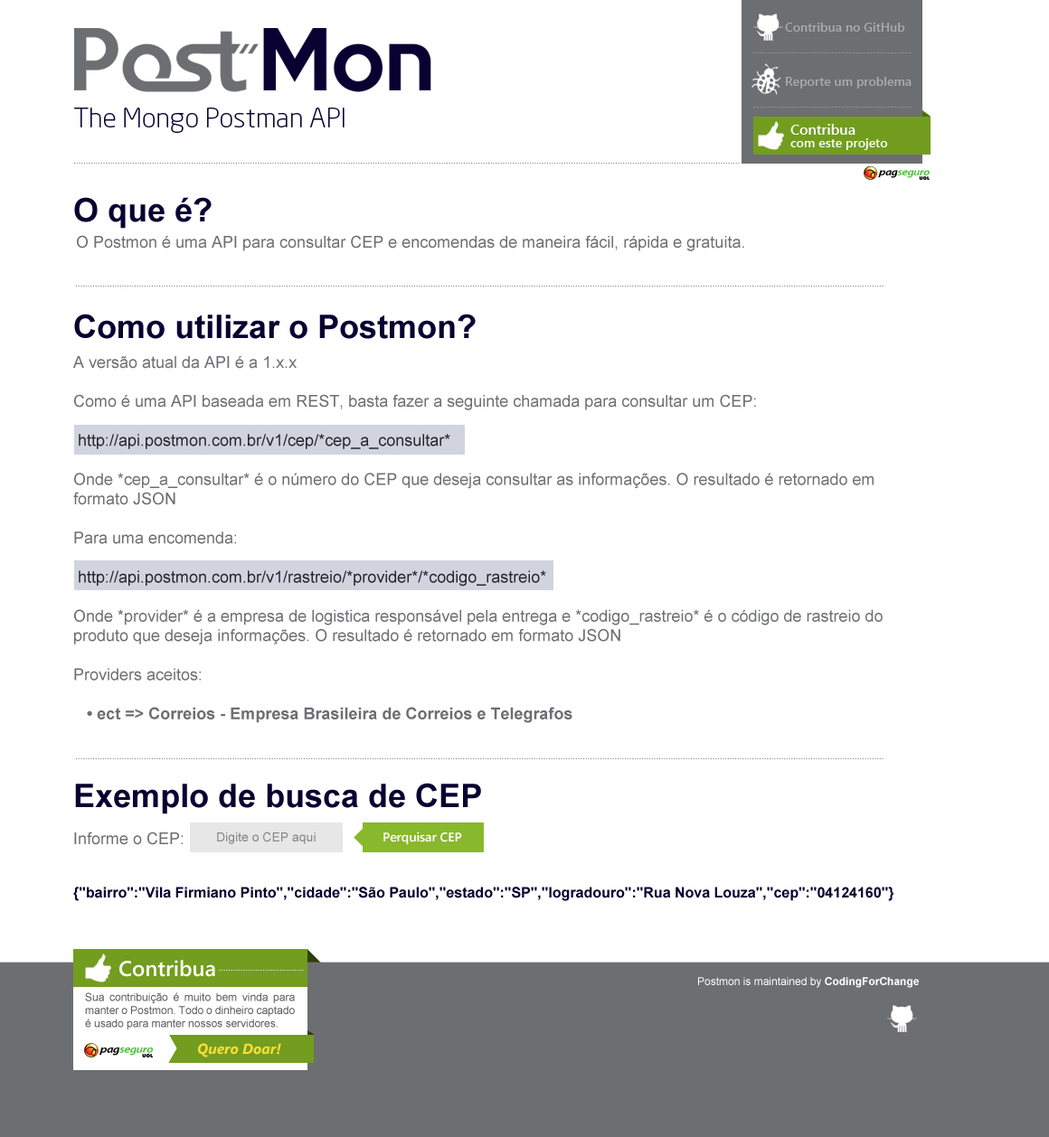
<style>
.page{position:relative;width:1049px;height:1137px;background:#ffffff}
.page>*{position:absolute;margin:0}
.t1{font:12.7px "SegoeUI-SemiBold";color:#aaaaab}
.t2{font:27.1px "NeoSansStd-Light";color:#090131}
.t3{font:12.7px/12.7px "SegoeUI-SemiBold";color:#ffffff}
.t4{font:14.5px/12.7px "SegoeUI-SemiBold";color:#ffffff}
.t5{font:32.5px "Arial-BoldMT";color:#090131}
.t6{font:16.3px "ArialMT";color:#6d6e71}
.t7{font:16.3px "ArialMT";color:#24262b}
.t8{font:16.3px "Arial-BoldMT";color:#6d6e71}
.t9{font:12.7px "ArialMT";color:#8b8686}
.t10{font:12.7px "SegoeUI-SemiBold";color:#ffffff}
.t11{font:14.5px "Arial-BoldMT";color:#090131}
.t12{font:21.7px "SegoeUI-SemiBold";color:#ffffff}
.t13{font:10.8px "ArialMT";color:#ffffff}
.t14{font:10.8px "Arial-BoldMT";color:#ffffff}
.t15{font:10.8px "ArialMT";color:#595959}
.t16{font:14.5px "SegoeUI-BoldItalic";color:#ffdc36}
</style>
<div class="page">
<p class="t1" style="left:785px;top:23px;width:120px;height:9px">Contribua no GitHub</p>
<p class="t1" style="left:786px;top:77px;width:125px;height:12px">Reporte um problema</p>
<p class="t2" style="left:74px;top:108px;width:270px;height:25px">The Mongo Postman API</p>
<p class="t3" style="left:790px;top:124px;width:98px;height:26px"><span class="t4">Contribua <br></span>com este projeto</p>
<p class="t5" style="left:74px;top:197px;width:138px;height:32px">O que é?</p>
<p class="t6" style="left:77px;top:235px;width:667px;height:16px">O Postmon é uma API para consultar CEP e encomendas de maneira fácil, rápida e gratuita.</p>
<p class="t5" style="left:74px;top:314px;width:401px;height:25px">Como utilizar o Postmon?</p>
<p class="t6" style="left:73px;top:356px;width:809px;height:367px">A versão atual da API é a 1.x.x<br><br>Como é uma API baseada em REST, basta fazer a seguinte chamada para consultar um CEP:<br><br> <span class="t7">http://api.postmon.com.br/v1/cep/*cep_a_consultar*<br></span><br>Onde *cep_a_consultar* é o número do CEP que deseja consultar as informações. O resultado é retornado em formato JSON<br><br>Para uma encomenda:<br><br> <span class="t7">http://api.postmon.com.br/v1/rastreio/*provider*/*codigo_rastreio*<br></span><br>Onde *provider* é a empresa de logistica responsável pela entrega e *codigo_rastreio* é o código de rastreio do produto que deseja informações. O resultado é retornado em formato JSON<br><br>Providers aceitos:<br><br>   <span class="t8">• ect =&gt; Correios - Empresa Brasileira de Correios e Telegrafos</span></p>
<p class="t5" style="left:75px;top:783px;width:406px;height:31px">Exemplo de busca de CEP</p>
<p class="t6" style="left:74px;top:832px;width:109px;height:13px">Informe o CEP:</p>
<p class="t9" style="left:217px;top:832px;width:98px;height:12px">Digite o CEP aqui</p>
<p class="t10" style="left:383px;top:832px;width:79px;height:13px">Perquisar CEP</p>
<p class="t11" style="left:73px;top:887px;width:820px;height:14px">{"bairro":"Vila Firmiano Pinto","cidade":"São Paulo","estado":"SP","logradouro":"Rua Nova Louza","cep":"04124160"}</p>
<p class="t12" style="left:119px;top:960px;width:96px;height:17px">Contribua</p>
<p class="t13" style="left:698px;top:977px;width:220px;height:11px">Postmon is maintained by <span class="t14">CodingForChange</span></p>
<p class="t15" style="left:85px;top:993px;width:210px;height:37px;text-align:justify">Sua contribuição é muito bem vinda para manter o Postmon. Todo o dinheiro captado é usado para manter nossos servidores.</p>
<p class="t16" style="left:197px;top:1043px;width:84px;height:15px">Quero Doar!</p>
</div>
